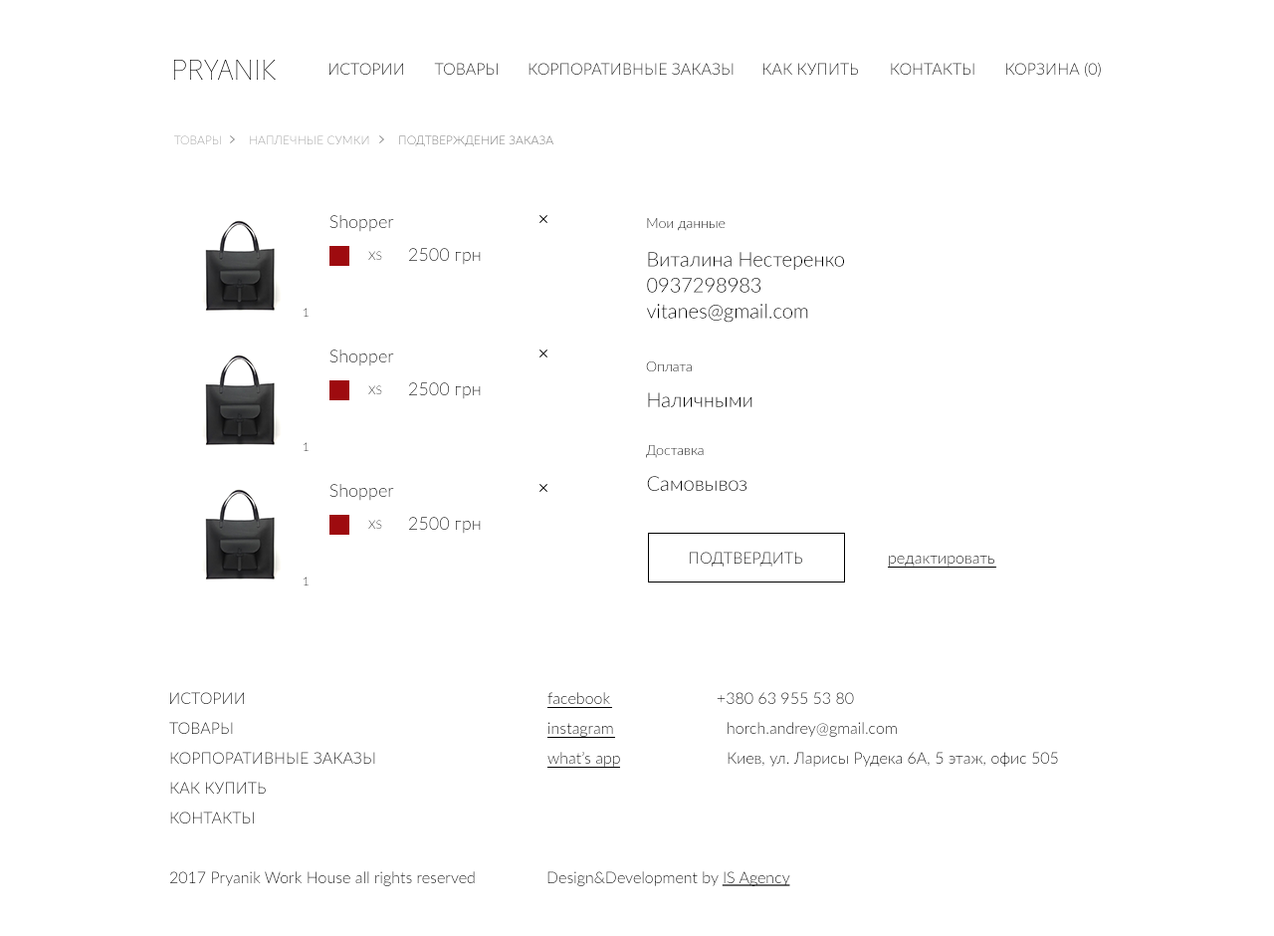
<style>
.page{position:relative;width:1274px;height:936px;background:#ffffff}
.page>*{position:absolute;margin:0}
.t1{font:15.9px "Lato-Light";text-transform:uppercase}
.t2{font:11.9px "Lato-Light";text-transform:uppercase}
.t3{font:17.9px "Lato-Light"}
.t4{font:13.9px "Lato-Light"}
.t5{font:11.9px "Lato-Light"}
.t6{font:19.9px/25.9px "Lato-Light";color:#000000}
.t7{font:19.9px "Lato-Light";color:#000000}
.t8{font:15.9px "Lato-Light";color:#010000;text-transform:uppercase}
.t9{font:15.9px "Lato-Light"}
.t10{font:15.9px "Lato-Light";color:#000000}
.t11{font:15.9px "Lato-Light";color:#000000;text-decoration:underline}
</style>
<div class="page">
<p class="t1" style="left:330px;top:63px;width:73px;height:12px">Истории</p>
<p class="t1" style="left:434px;top:63px;width:64px;height:12px">Товары</p>
<p class="t1" style="left:529px;top:63px;width:205px;height:12px">КоРпоративные заказы</p>
<p class="t1" style="left:764px;top:63px;width:94px;height:12px">как купить</p>
<p class="t1" style="left:891px;top:63px;width:84px;height:12px">Контакты</p>
<p class="t1" style="left:1006px;top:62px;width:95px;height:15px">Корзина (0)</p>
<p class="t2" style="left:174px;top:135px;width:47px;height:9px">Товары</p>
<p class="t2" style="left:250px;top:135px;width:119px;height:9px">Наплечные сумки</p>
<p class="t2" style="left:399px;top:135px;width:155px;height:11px">Подтверждение заказа</p>
<p class="t3" style="left:330px;top:215px;width:64px;height:17px">Shopper</p>
<p class="t4" style="left:647px;top:218px;width:79px;height:13px">Мои данные</p>
<p class="t5" style="left:368px;top:251px;width:14px;height:9px">XS</p>
<p class="t3" style="left:409px;top:248px;width:72px;height:17px">2500 грн</p>
<p class="t6" style="left:647px;top:252px;width:197px;height:71px">Виталина Нестеренко<br>0937298983<br>vitanes@gmail.com</p>
<p class="t5" style="left:304px;top:308px;width:5px;height:9px">1</p>
<p class="t3" style="left:330px;top:349px;width:64px;height:17px">Shopper</p>
<p class="t4" style="left:646px;top:361px;width:46px;height:10px">Оплата</p>
<p class="t5" style="left:368px;top:385px;width:14px;height:9px">XS</p>
<p class="t3" style="left:409px;top:382px;width:72px;height:17px">2500 грн</p>
<p class="t7" style="left:648px;top:392px;width:105px;height:15px">Наличными</p>
<p class="t5" style="left:304px;top:442px;width:5px;height:9px">1</p>
<p class="t4" style="left:646px;top:445px;width:58px;height:13px">Доставка</p>
<p class="t3" style="left:330px;top:484px;width:64px;height:17px">Shopper</p>
<p class="t7" style="left:647px;top:476px;width:100px;height:15px">Самовывоз</p>
<p class="t5" style="left:368px;top:520px;width:14px;height:9px">XS</p>
<p class="t3" style="left:409px;top:517px;width:72px;height:17px">2500 грн</p>
<p class="t8" style="left:690px;top:552px;width:112px;height:14px">Подтвердить</p>
<p class="t9" style="left:889px;top:555px;width:106px;height:11px">редактировать</p>
<p class="t5" style="left:304px;top:576px;width:5px;height:9px">1</p>
<p class="t9" style="left:170px;top:692px;width:74px;height:12px">ИСТОРИИ</p>
<p class="t9" style="left:548px;top:692px;width:62px;height:12px">facebook</p>
<p class="t9" style="left:717px;top:692px;width:137px;height:12px">+380 63 955 53 80</p>
<p class="t9" style="left:169px;top:722px;width:64px;height:12px">ТОВАРЫ</p>
<p class="t9" style="left:549px;top:722px;width:64px;height:15px">instagram</p>
<p class="t9" style="left:728px;top:722px;width:169px;height:15px">horch.andrey@gmail.com</p>
<p class="t1" style="left:170px;top:752px;width:205px;height:12px">Корпоративные заказы</p>
<p class="t9" style="left:548px;top:752px;width:72px;height:15px">what’s app</p>
<p class="t9" style="left:728px;top:752px;width:330px;height:15px">Киев, ул. Ларисы Рудека 6А, 5 этаж, офис 505</p>
<p class="t1" style="left:170px;top:781px;width:96px;height:12px">Как купить</p>
<p class="t9" style="left:170px;top:811px;width:84px;height:12px">КОНТАКТЫ</p>
<p class="t9" style="left:170px;top:871px;width:305px;height:15px">2017 Pryanik Work House all rights reserved</p>
<p class="t10" style="left:548px;top:871px;width:242px;height:15px">Design&amp;Development by <span class="t11">IS Agency</span></p>
</div>
